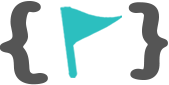
<style>
.page{position:relative;width:169px;height:85px;background:#ffffff}
.page>*{position:absolute;margin:0}
.t1{font:99.6px "BaksoSapi";letter-spacing:0.05em;color:#555555}
</style>
<div class="page">
<p class="t1" style="left:0px;top:1px;width:168px;height:84px">{  }</p>
</div>
